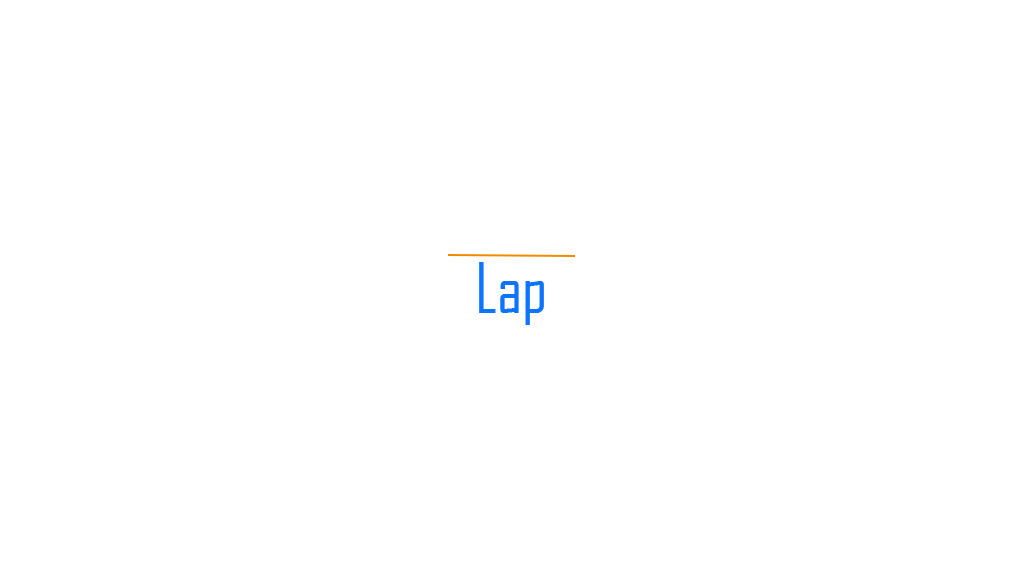
<style>
.page{position:relative;width:1024px;height:576px;background:#ffffff}
.page>*{position:absolute;margin:0}
.t1{font:66.7px "AgencyFB-Reg";color:#0d74ff}
</style>
<div class="page">
<p class="t1" style="left:479px;top:262px;width:65px;height:63px">Lap</p>
</div>
